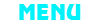
<style>
.page{position:relative;width:102px;height:27px;background:#ffffff}
.page>*{position:absolute;margin:0}
.t1{font:20px "VNI-Revue-Bold";color:#00f2fa}
</style>
<div class="page">
<p class="t1" style="left:19px;top:4px;width:62px;height:16px">MENU</p>
</div>
